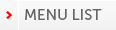
<style>
.page{position:relative;width:116px;height:30px;background:#f8f8f8}
.page>*{position:absolute;margin:0}
.t1{font:15px "MuseoSans-500";color:#666666}
</style>
<div class="page">
<p class="t1" style="left:25px;top:9px;width:77px;height:11px">MENU LIST</p>
</div>
